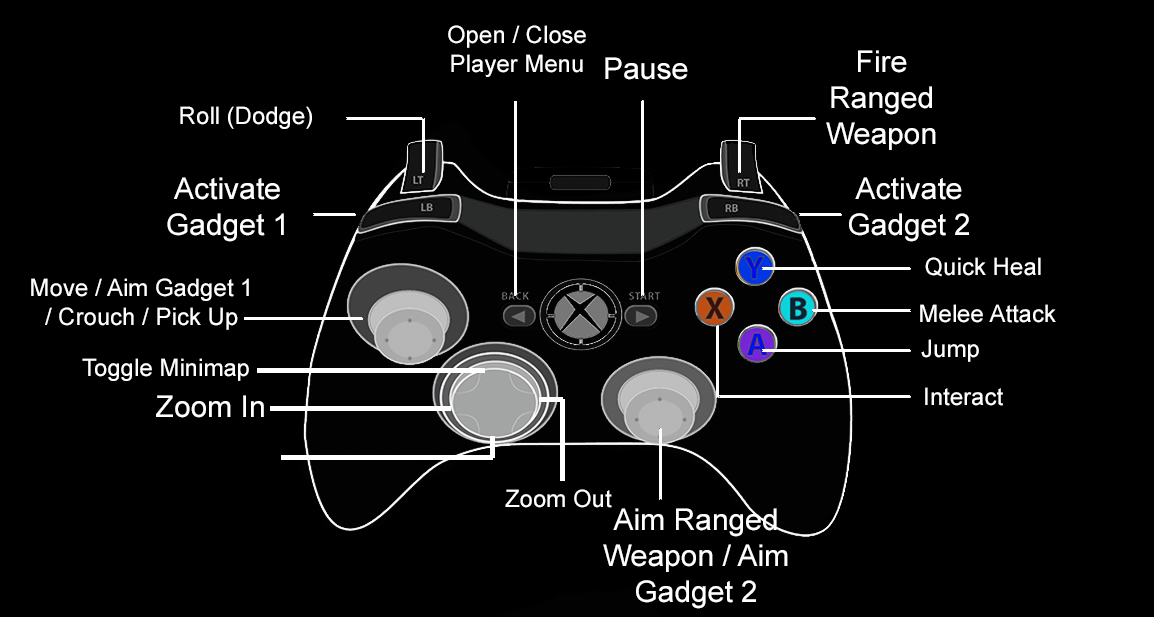
<style>
.page{position:relative;width:1154px;height:617px;background:#000000}
.page>*{position:absolute;margin:0}
.t1{font:24px "ArialMT";color:#ffffff}
.t2{font:30px "ArialMT";color:#ffffff}
</style>
<div class="page">
<p class="t1" style="left:448px;top:25px;width:138px;height:52px;text-align:center">Open / Close<br>Player Menu</p>
<p class="t2" style="left:826px;top:50px;width:110px;height:100px;text-align:center">Fire Ranged Weapon</p>
<p class="t2" style="left:605px;top:57px;width:83px;height:23px">Pause</p>
<p class="t1" style="left:180px;top:106px;width:132px;height:23px">Roll (Dodge)</p>
<p class="t2" style="left:167px;top:177px;width:117px;height:65px;text-align:center">Activate Gadget 1</p>
<p class="t2" style="left:849px;top:177px;width:120px;height:65px;text-align:center">Activate Gadget 2</p>
<p class="t1" style="left:925px;top:257px;width:116px;height:20px">Quick Heal</p>
<p class="t1" style="left:31px;top:278px;width:218px;height:52px;text-align:center">Move / Aim Gadget 1 / Crouch / Pick Up</p>
<p class="t1" style="left:920px;top:304px;width:136px;height:19px">Melee Attack</p>
<p class="t1" style="left:921px;top:339px;width:58px;height:23px">Jump</p>
<p class="t1" style="left:82px;top:358px;width:167px;height:23px">Toggle Minimap</p>
<p class="t1" style="left:925px;top:387px;width:78px;height:19px">Interact</p>
<p class="t2" style="left:156px;top:395px;width:108px;height:23px">Zoom In</p>
<p class="t1" style="left:505px;top:489px;width:107px;height:19px">Zoom Out</p>
<p class="t2" style="left:603px;top:508px;width:185px;height:101px;text-align:center">Aim Ranged Weapon / Aim Gadget 2</p>
</div>
